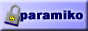
<style>
.page{position:relative;width:88px;height:31px}
.page>*{position:absolute;margin:0}
.t1{font:12px "Arial-Black";color:#00006a;font-weight:bold}
</style>
<div class="page">
<p class="t1" style="left:20px;top:10px;width:63px;height:12px">paramiko</p>
</div>
